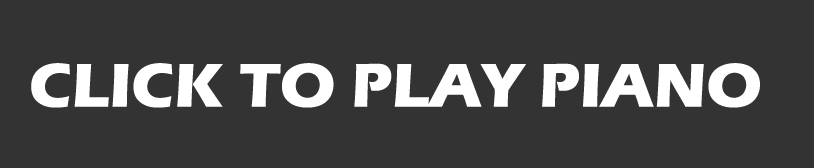
<style>
.page{position:relative;width:814px;height:168px;background:#333333}
.page>*{position:absolute;margin:0}
.t1{font:64px "ErasITC-Bold";color:#ffffff}
</style>
<div class="page">
<p class="t1" style="left:31px;top:63px;width:729px;height:45px">CLICK TO PLAY PIANO</p>
</div>
